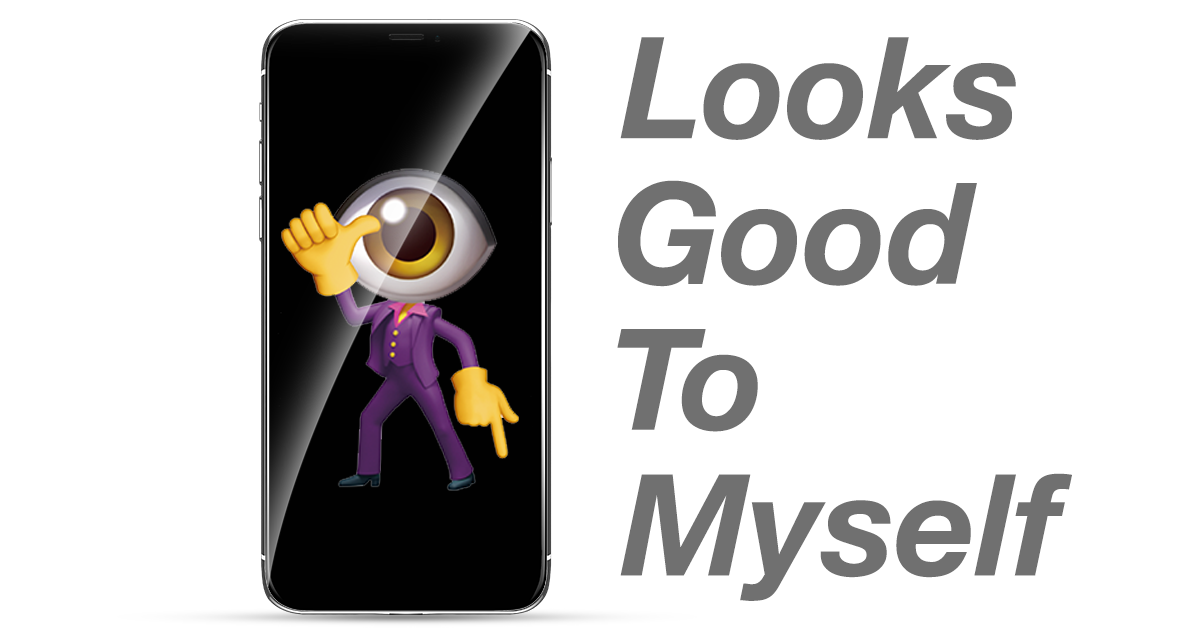
<style>
.page{position:relative;width:1200px;height:630px;background:#ffffff}
.page>*{position:absolute;margin:0}
.t1{font:140.9px/145.8px "HelveticaNeue-BoldItalic";color:#707070}
</style>
<div class="page">
<p class="t1" style="left:617px;top:37px;width:455px;height:564px">Looks<br>Good<br>To<br>Myself</p>
</div>
